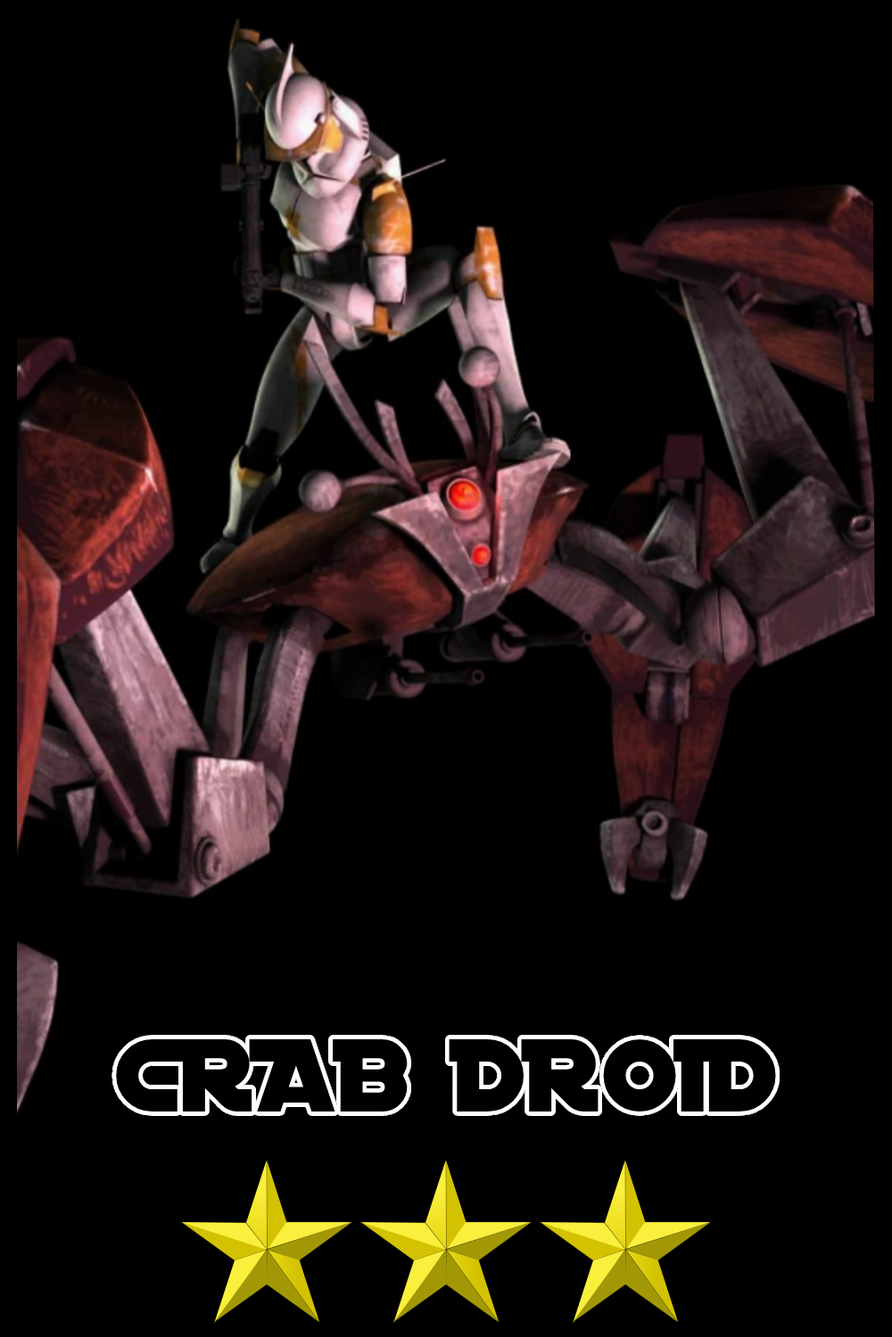
<style>
.page{position:relative;width:892px;height:1337px;background:#000000}
.page>*{position:absolute;margin:0}
.t1{font:111px "DistantGalaxy";color:#000000}
</style>
<div class="page">
<p class="t1" style="left:116px;top:1040px;width:660px;height:72px">CRAB DROID</p>
</div>
